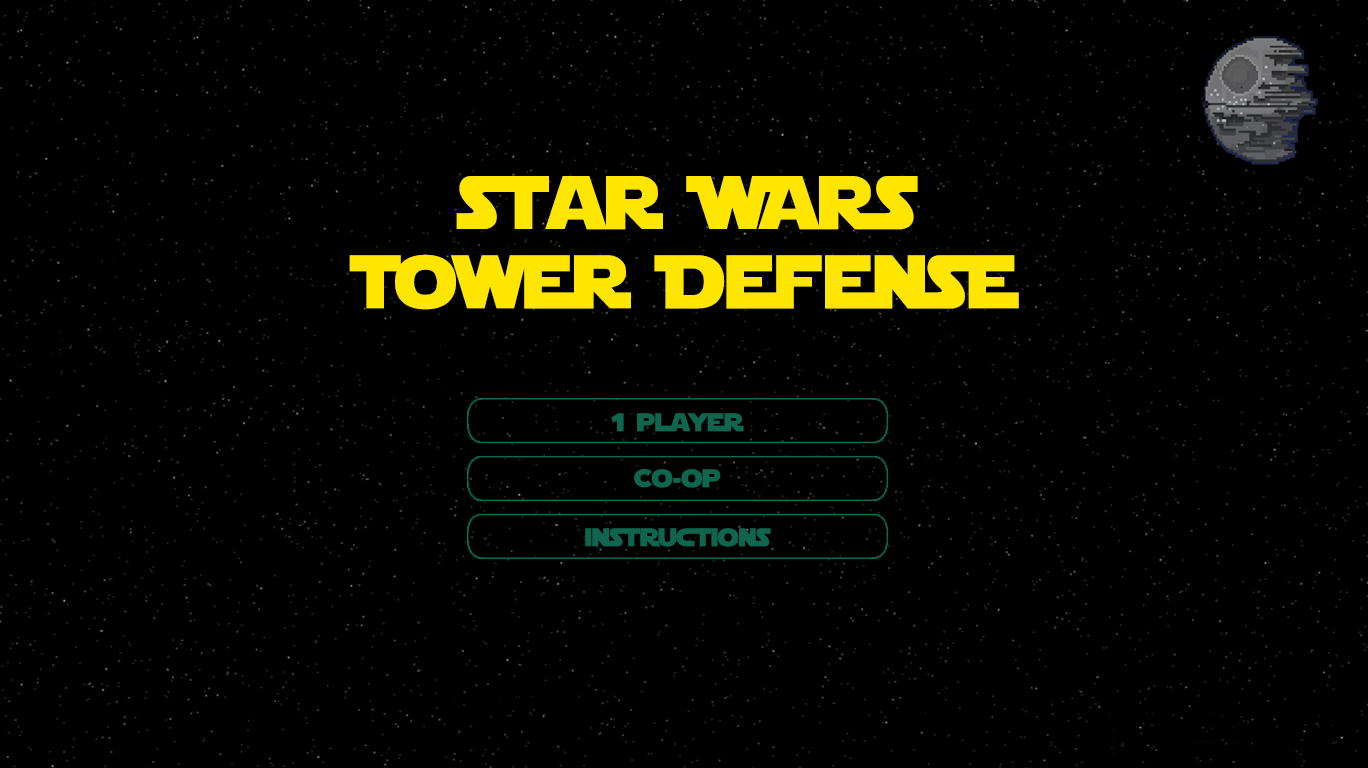
<style>
.page{position:relative;width:1368px;height:768px;background:#000000}
.page>*{position:absolute;margin:0}
.t1{font:75px/58.4px "StarJedi";color:#ffe600}
.t2{font:75px/20.9px "StarJedi";color:#ffe600}
.t3{font:25px "StarJedi";color:#0f654e}
</style>
<div class="page">
<p class="t1" style="left:349px;top:176px;width:670px;height:134px;text-align:center"><span class="t2">star WArs<br><br></span>Tower Defense</p>
<p class="t3" style="left:611px;top:413px;width:133px;height:19px">1 player</p>
<p class="t3" style="left:634px;top:469px;width:87px;height:19px">Co-op</p>
<p class="t3" style="left:585px;top:528px;width:186px;height:19px">instructions</p>
</div>
